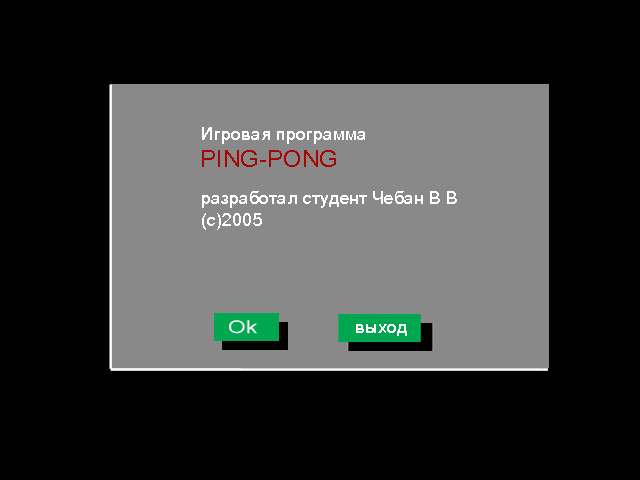
<style>
.page{position:relative;width:640px;height:480px;background:#000000}
.page>*{position:absolute;margin:0}
.t1{font:18px "HLife";color:#ffffff}
.t2{font:24px "HLife";color:#a50606}
</style>
<div class="page">
<p class="t1" style="left:202px;top:127px;width:163px;height:17px">Игровая программа</p>
<p class="t2" style="left:202px;top:150px;width:134px;height:17px">PING-PONG</p>
<p class="t1" style="left:202px;top:191px;width:255px;height:39px">разработал студент Чебан В В<br>(c)2005</p>
</div>
